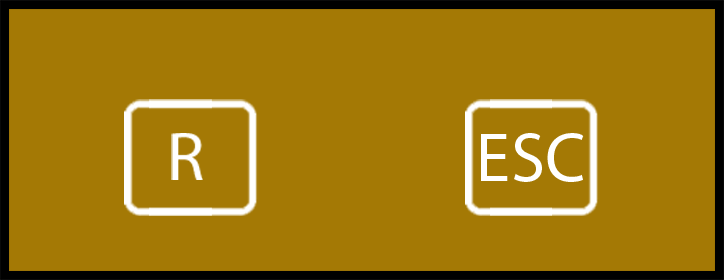
<style>
.page{position:relative;width:724px;height:280px;background:#a47905}
.page>*{position:absolute;margin:0}
.t1{font:69.6px "MyriadPro-Regular";color:#ffffff}
</style>
<div class="page">
<p class="t1" style="left:481px;top:133px;width:103px;height:49px">ESC</p>
</div>
